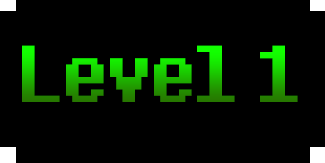
<style>
.page{position:relative;width:325px;height:163px;background:#000000}
.page>*{position:absolute;margin:0}
.t1{font:100px "8bitoperator-JVE"}
</style>
<div class="page">
<p class="t1" style="left:22px;top:45px;width:276px;height:57px">Level 1</p>
</div>
